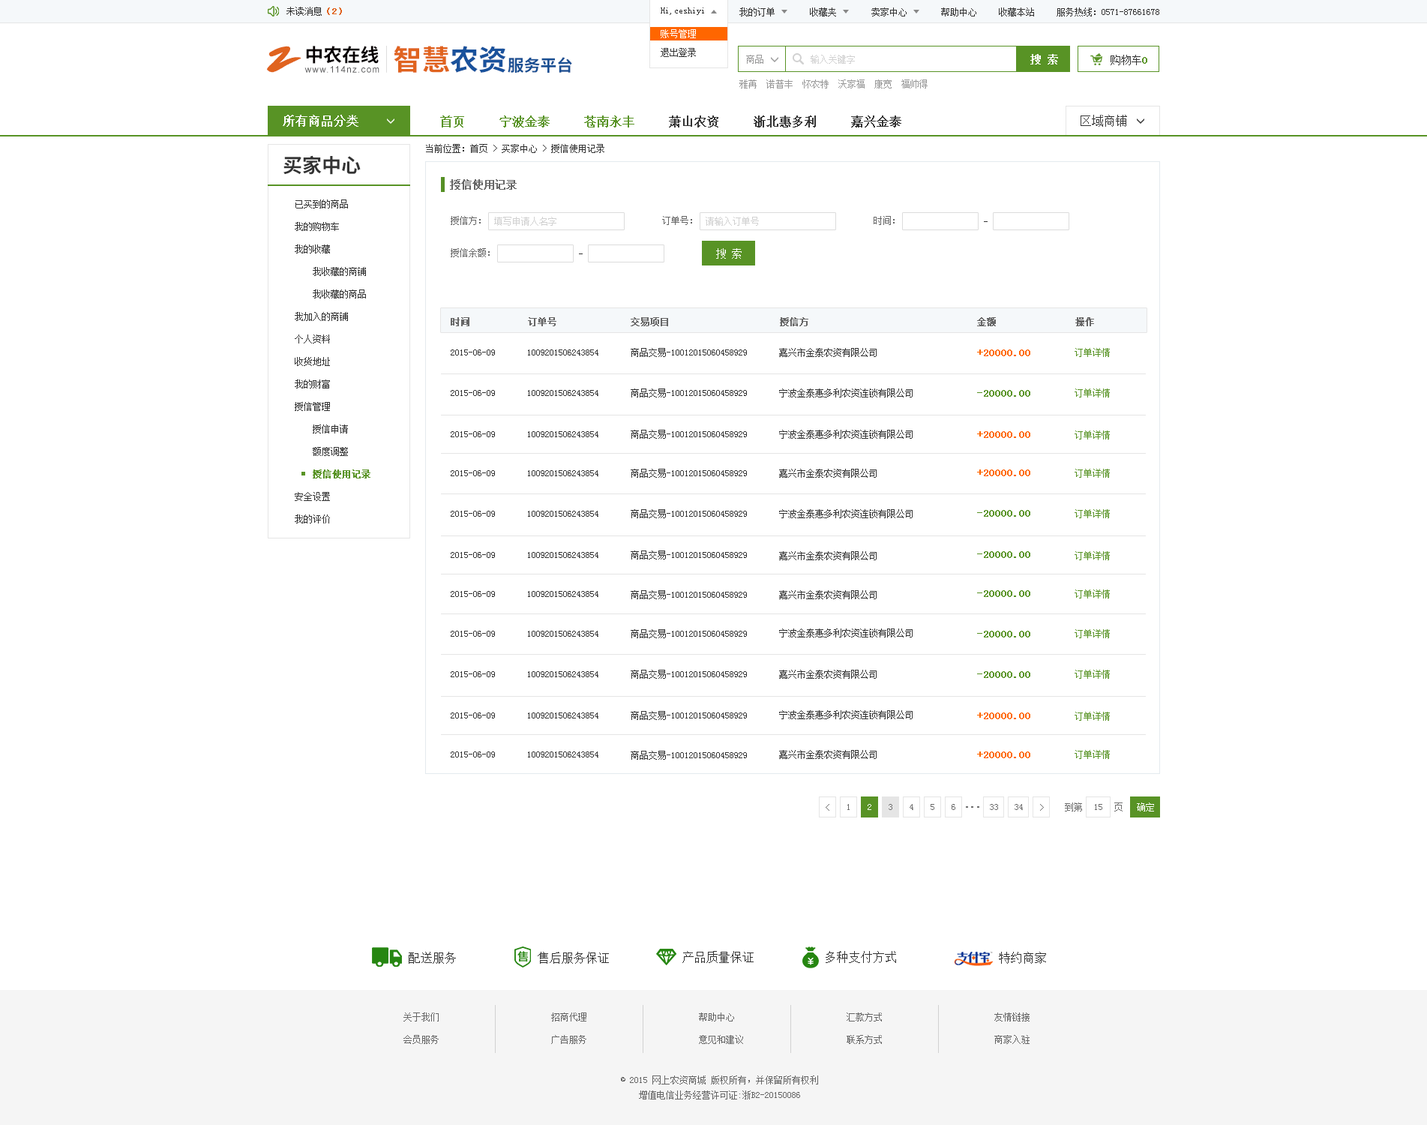
<style>
.page{position:relative;width:1427px;height:1125px;background:#ffffff}
.page>*{position:absolute;margin:0}
.t1{font:9px "SimSun";color:#333333}
.t2{font:9px "SimSun";color:#e0631f;font-weight:bold}
.t3{font:9px/18.8px "SimSun";color:#ffffff}
.t4{font:9px/18.8px "SimSun";color:#333333}
.t5{font:38px "SmudgerLetPlain";color:#e0631f}
.t6{font:18.6px "SourceHanSansCN-Bold";color:#060001}
.t7{font:28.4px "SourceHanSansCN-Bold";color:#e0631f}
.t8{font:28.4px "SourceHanSansCN-Bold";color:#1a529c}
.t9{font:10.5px "SimSun";color:#ffffff;font-weight:bold}
.t10{font:16.3px "SourceHanSansCN-Bold";color:#194f93}
.t11{font:9px "SimSun";color:#999999}
.t12{font:9px "SimSun";color:#d1d1d1}
.t13{font:10.5px "SimSun";color:#333333}
.t14{font:10.5px "SimSun";color:#589325;font-weight:bold}
.t15{font:8.9px "ArialMT";letter-spacing:0.1em;color:#585859}
.t16{font:12px "SimSun";color:#ffffff;font-weight:bold}
.t17{font:12px "SimSun";color:#333333;font-weight:bold}
.t18{font:12px "SimSun";color:#589325;font-weight:bold}
.t19{font:12px "SimSun";color:#333333}
.t20{font:19.5px "SourceHanSansCN-Bold";color:#333333}
.t21{font:10.5px "SimSun";color:#666666;font-weight:bold}
.t22{font:9px/22.5px "SimSun";color:#333333}
.t23{font:9px/22.5px "SimSun";color:#589325;font-weight:bold}
.t24{font:9px "SimSun";color:#666666}
.t25{font:10.5px "SimSun";color:#ffffff}
.t26{font:9px "SimSun";color:#666666;font-weight:bold}
.t27{font:10.5px "SimSun";color:#ff6600;font-weight:bold}
.t28{font:9px "SimSun";color:#589325}
.t29{font:9px "SimSun";color:#6e6e6e}
.t30{font:9px "SimSun";color:#ffffff}
.t31{font:10.5px "SimSun";letter-spacing:-0.3em;color:#6e6e6e;font-weight:bold}
.t32{font:9px/22.5px "SimSun";color:#666666}
.t33{font:9px/15px "SimSun";color:#666666}
</style>
<div class="page">
<p class="t1" style="left:286px;top:7px;width:56px;height:9px">未读消息<span class="t2">（2）</span></p>
<p class="t1" style="left:661px;top:8px;width:43px;height:7px">Hi,ceshiyi</p>
<p class="t1" style="left:661px;top:8px;width:43px;height:7px">Hi,ceshiyi</p>
<p class="t1" style="left:740px;top:8px;width:35px;height:8px">我的订单</p>
<p class="t1" style="left:810px;top:8px;width:26px;height:8px">收藏夹</p>
<p class="t1" style="left:872px;top:8px;width:35px;height:8px">卖家中心</p>
<p class="t1" style="left:941px;top:8px;width:35px;height:8px">帮助中心</p>
<p class="t1" style="left:999px;top:8px;width:35px;height:8px">收藏本站</p>
<p class="t1" style="left:1057px;top:8px;width:103px;height:8px">服务热线：0571-87661678</p>
<p class="t3" style="left:661px;top:29px;width:35px;height:28px">账号管理<br><span class="t4">退出登录</span></p>
<p class="t5" style="left:267px;top:46px;width:35px;height:27px">Z</p>
<p class="t6" style="left:306px;top:46px;width:73px;height:18px">中农在线</p>
<p class="t7" style="left:394px;top:46px;width:112px;height:27px">智慧<span class="t8">农资</span></p>
<p class="t9" style="left:1030px;top:54px;width:28px;height:10px">搜 索</p>
<p class="t10" style="left:508px;top:57px;width:64px;height:16px">服务平台</p>
<p class="t11" style="left:746px;top:55px;width:18px;height:9px">商品</p>
<p class="t12" style="left:811px;top:55px;width:44px;height:9px">输入关键字</p>
<p class="t13" style="left:1111px;top:55px;width:37px;height:10px">购物车<span class="t14">0</span></p>
<p class="t15" style="left:304px;top:66px;width:76px;height:7px">www.114nz.com</p>
<p class="t11" style="left:740px;top:80px;width:188px;height:8px">雅苒  诺普丰  怀农特  沃家福  康宽  福帅得</p>
<p class="t16" style="left:283px;top:115px;width:75px;height:12px">所有商品分类</p>
<p class="t17" style="left:440px;top:116px;width:462px;height:12px"><span class="t18">首页     宁波金泰     苍南永丰    </span> 萧山农资     浙北惠多利     嘉兴金泰</p>
<p class="t19" style="left:1081px;top:115px;width:46px;height:12px">区域商铺</p>
<p class="t1" style="left:426px;top:144px;width:178px;height:9px">当前位置：首页 &gt; 买家中心 &gt; 授信使用记录</p>
<p class="t20" style="left:284px;top:155px;width:77px;height:20px">买家中心</p>
<p class="t21" style="left:450px;top:179px;width:67px;height:11px">授信使用记录</p>
<p class="t22" style="left:295px;top:200px;width:75px;height:324px">已买到的商品<br>我的购物车<br>我的收藏<br>    我收藏的商铺<br>    我收藏的商品<br>我加入的商铺<br>个人资料<br>收货地址<br>我的财富<br>授信管理<br>    授信申请<br>    额度调整<br>    <span class="t23">授信使用记录<br></span>安全设置<br>我的评价</p>
<p class="t24" style="left:451px;top:216px;width:30px;height:9px">授信方：</p>
<p class="t12" style="left:494px;top:217px;width:62px;height:9px">填写申请人名字</p>
<p class="t24" style="left:662px;top:216px;width:30px;height:9px">订单号：</p>
<p class="t12" style="left:706px;top:217px;width:53px;height:9px">请输入订单号</p>
<p class="t24" style="left:874px;top:216px;width:21px;height:9px">时间：</p>
<p class="t24" style="left:451px;top:248px;width:39px;height:9px">授信余额：</p>
<p class="t25" style="left:716px;top:248px;width:26px;height:11px">搜 索</p>
<p class="t26" style="left:451px;top:317px;width:643px;height:9px">时间           订单号              交易项目                     授信方                                金额               操作</p>
<p class="t1" style="left:451px;top:350px;width:44px;height:6px">2015-06-09</p>
<p class="t1" style="left:528px;top:350px;width:70px;height:6px">1009201506243854</p>
<p class="t1" style="left:631px;top:348px;width:116px;height:9px">商品交易-10012015060458929</p>
<p class="t1" style="left:779px;top:348px;width:98px;height:9px">嘉兴市金泰农资有限公司</p>
<p class="t27" style="left:977px;top:350px;width:53px;height:6px">+20000.00</p>
<p class="t28" style="left:1075px;top:348px;width:35px;height:9px">订单详情</p>
<p class="t1" style="left:451px;top:390px;width:44px;height:6px">2015-06-09</p>
<p class="t1" style="left:528px;top:390px;width:70px;height:6px">1009201506243854</p>
<p class="t1" style="left:631px;top:388px;width:116px;height:10px">商品交易-10012015060458929</p>
<p class="t1" style="left:779px;top:388px;width:134px;height:10px">宁波金泰惠多利农资连锁有限公司</p>
<p class="t14" style="left:977px;top:390px;width:53px;height:7px">-20000.00</p>
<p class="t28" style="left:1075px;top:388px;width:35px;height:10px">订单详情</p>
<p class="t1" style="left:451px;top:431px;width:44px;height:6px">2015-06-09</p>
<p class="t1" style="left:528px;top:431px;width:70px;height:6px">1009201506243854</p>
<p class="t1" style="left:631px;top:430px;width:116px;height:9px">商品交易-10012015060458929</p>
<p class="t1" style="left:779px;top:430px;width:134px;height:9px">宁波金泰惠多利农资连锁有限公司</p>
<p class="t27" style="left:977px;top:431px;width:53px;height:7px">+20000.00</p>
<p class="t28" style="left:1075px;top:430px;width:35px;height:10px">订单详情</p>
<p class="t1" style="left:451px;top:470px;width:44px;height:6px">2015-06-09</p>
<p class="t1" style="left:528px;top:470px;width:70px;height:6px">1009201506243854</p>
<p class="t1" style="left:631px;top:469px;width:116px;height:9px">商品交易-10012015060458929</p>
<p class="t1" style="left:779px;top:469px;width:98px;height:9px">嘉兴市金泰农资有限公司</p>
<p class="t27" style="left:977px;top:470px;width:53px;height:6px">+20000.00</p>
<p class="t28" style="left:1075px;top:469px;width:35px;height:9px">订单详情</p>
<p class="t1" style="left:631px;top:509px;width:116px;height:9px">商品交易-10012015060458929</p>
<p class="t1" style="left:779px;top:509px;width:134px;height:9px">宁波金泰惠多利农资连锁有限公司</p>
<p class="t14" style="left:977px;top:510px;width:53px;height:7px">-20000.00</p>
<p class="t28" style="left:1075px;top:509px;width:35px;height:9px">订单详情</p>
<p class="t1" style="left:451px;top:511px;width:44px;height:6px">2015-06-09</p>
<p class="t1" style="left:528px;top:511px;width:70px;height:6px">1009201506243854</p>
<p class="t1" style="left:451px;top:552px;width:44px;height:6px">2015-06-09</p>
<p class="t1" style="left:528px;top:552px;width:70px;height:6px">1009201506243854</p>
<p class="t1" style="left:631px;top:550px;width:116px;height:10px">商品交易-10012015060458929</p>
<p class="t1" style="left:779px;top:551px;width:98px;height:9px">嘉兴市金泰农资有限公司</p>
<p class="t14" style="left:977px;top:551px;width:53px;height:7px">-20000.00</p>
<p class="t28" style="left:1075px;top:551px;width:35px;height:9px">订单详情</p>
<p class="t1" style="left:451px;top:591px;width:44px;height:6px">2015-06-09</p>
<p class="t1" style="left:528px;top:591px;width:70px;height:6px">1009201506243854</p>
<p class="t1" style="left:631px;top:590px;width:116px;height:9px">商品交易-10012015060458929</p>
<p class="t1" style="left:779px;top:590px;width:98px;height:9px">嘉兴市金泰农资有限公司</p>
<p class="t14" style="left:977px;top:590px;width:53px;height:7px">-20000.00</p>
<p class="t28" style="left:1075px;top:590px;width:35px;height:8px">订单详情</p>
<p class="t1" style="left:631px;top:629px;width:116px;height:9px">商品交易-10012015060458929</p>
<p class="t1" style="left:779px;top:628px;width:134px;height:10px">宁波金泰惠多利农资连锁有限公司</p>
<p class="t28" style="left:1075px;top:629px;width:35px;height:9px">订单详情</p>
<p class="t1" style="left:451px;top:631px;width:44px;height:6px">2015-06-09</p>
<p class="t1" style="left:528px;top:631px;width:70px;height:6px">1009201506243854</p>
<p class="t14" style="left:977px;top:631px;width:53px;height:7px">-20000.00</p>
<p class="t1" style="left:451px;top:671px;width:44px;height:6px">2015-06-09</p>
<p class="t1" style="left:528px;top:671px;width:70px;height:6px">1009201506243854</p>
<p class="t1" style="left:631px;top:670px;width:116px;height:9px">商品交易-10012015060458929</p>
<p class="t1" style="left:779px;top:670px;width:98px;height:9px">嘉兴市金泰农资有限公司</p>
<p class="t14" style="left:977px;top:671px;width:53px;height:7px">-20000.00</p>
<p class="t28" style="left:1075px;top:670px;width:35px;height:9px">订单详情</p>
<p class="t1" style="left:451px;top:712px;width:44px;height:6px">2015-06-09</p>
<p class="t1" style="left:528px;top:712px;width:70px;height:6px">1009201506243854</p>
<p class="t1" style="left:631px;top:711px;width:116px;height:9px">商品交易-10012015060458929</p>
<p class="t1" style="left:779px;top:710px;width:134px;height:9px">宁波金泰惠多利农资连锁有限公司</p>
<p class="t27" style="left:977px;top:712px;width:53px;height:7px">+20000.00</p>
<p class="t28" style="left:1075px;top:712px;width:35px;height:9px">订单详情</p>
<p class="t1" style="left:779px;top:750px;width:98px;height:9px">嘉兴市金泰农资有限公司</p>
<p class="t28" style="left:1075px;top:750px;width:35px;height:9px">订单详情</p>
<p class="t1" style="left:451px;top:752px;width:44px;height:6px">2015-06-09</p>
<p class="t1" style="left:528px;top:752px;width:70px;height:6px">1009201506243854</p>
<p class="t1" style="left:631px;top:751px;width:116px;height:9px">商品交易-10012015060458929</p>
<p class="t27" style="left:977px;top:752px;width:53px;height:6px">+20000.00</p>
<p class="t29" style="left:826px;top:804px;width:4px;height:7px">&lt;</p>
<p class="t29" style="left:848px;top:804px;width:2px;height:6px">1</p>
<p class="t30" style="left:868px;top:804px;width:4px;height:6px">2</p>
<p class="t29" style="left:889px;top:804px;width:3px;height:6px">3</p>
<p class="t29" style="left:910px;top:804px;width:4px;height:6px">4</p>
<p class="t29" style="left:931px;top:804px;width:3px;height:6px">5</p>
<p class="t29" style="left:952px;top:804px;width:4px;height:6px">6</p>
<p class="t31" style="left:966px;top:806px;width:14px;height:2px">. . .</p>
<p class="t29" style="left:990px;top:804px;width:8px;height:6px">33</p>
<p class="t29" style="left:1015px;top:804px;width:8px;height:6px">34</p>
<p class="t29" style="left:1040px;top:804px;width:4px;height:7px">&gt;</p>
<p class="t29" style="left:1065px;top:802px;width:58px;height:10px">到第       页</p>
<p class="t29" style="left:1095px;top:804px;width:7px;height:6px">15</p>
<p class="t30" style="left:1137px;top:802px;width:17px;height:10px">确定</p>
<p class="t19" style="left:409px;top:952px;width:47px;height:12px">配送服务</p>
<p class="t19" style="left:538px;top:952px;width:71px;height:12px">售后服务保证</p>
<p class="t19" style="left:682px;top:951px;width:72px;height:12px">产品质量保证</p>
<p class="t19" style="left:826px;top:951px;width:70px;height:12px">多种支付方式</p>
<p class="t19" style="left:999px;top:952px;width:47px;height:12px">特约商家</p>
<p class="t32" style="left:404px;top:1012px;width:35px;height:32px">关于我们<br>会员服务</p>
<p class="t32" style="left:551px;top:1012px;width:35px;height:32px">招商代理<br>广告服务</p>
<p class="t32" style="left:699px;top:1012px;width:44px;height:32px">帮助中心<br>意见和建议</p>
<p class="t32" style="left:847px;top:1012px;width:35px;height:32px">汇款方式<br>联系方式</p>
<p class="t32" style="left:994px;top:1012px;width:36px;height:32px">友情链接<br>商家入驻</p>
<p class="t33" style="left:621px;top:1076px;width:197px;height:24px;text-align:center">© 2015 网上农资商城 版权所有，并保留所有权利<br>增值电信业务经营许可证:浙B2-20150086</p>
</div>
